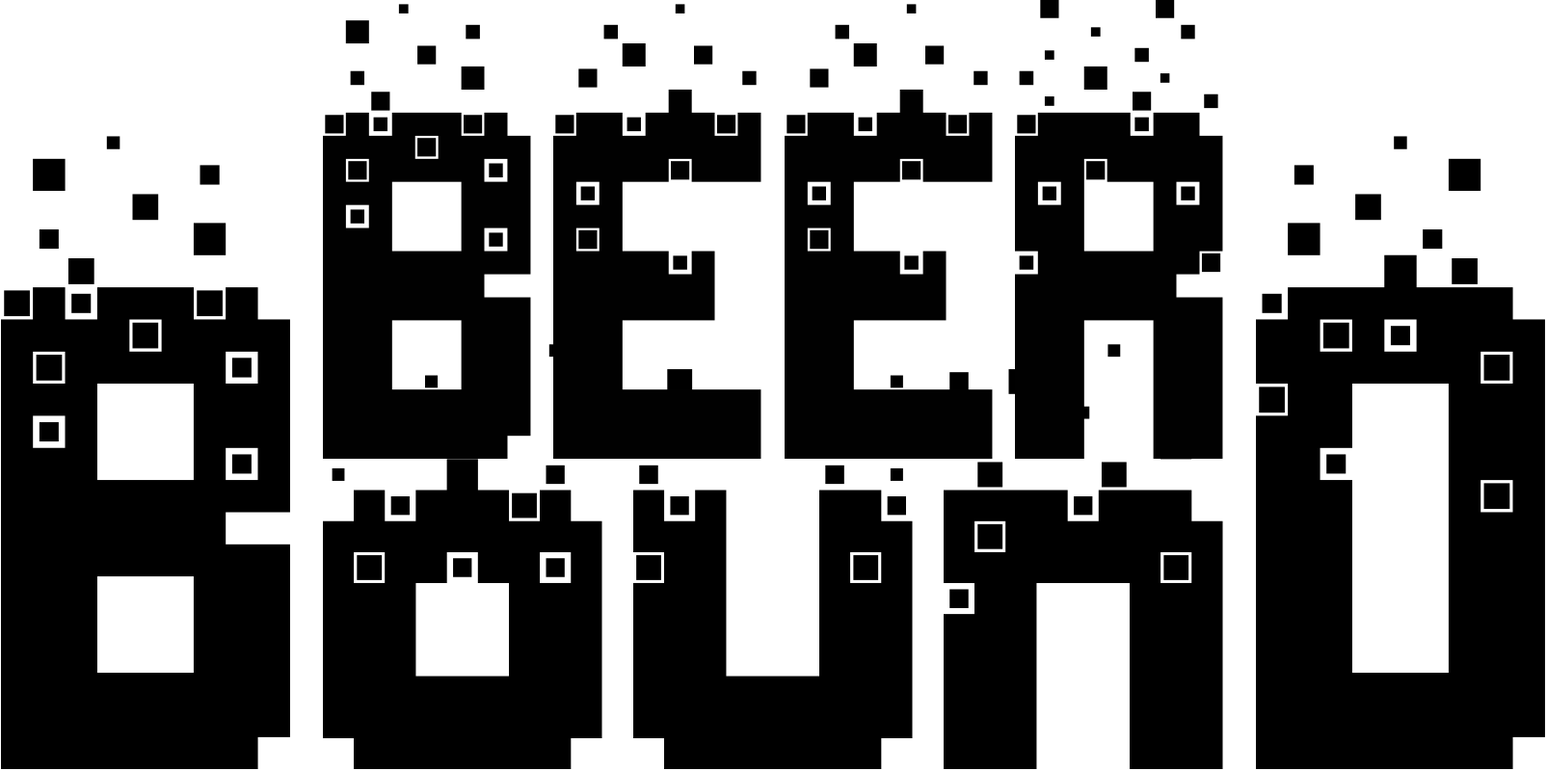
<style>
.page{position:relative;width:1547px;height:771px;background:#ffffff}
.page>*{position:absolute;margin:0}
.t1{font:576.9px "Nightmare-Codehack";color:#010101}
.t2{font:803.1px "Nightmare-Codehack";color:#000000}
.t3{font:775.1px "Nightmare-Codehack";color:#000000}
</style>
<div class="page">
<p class="t1" style="left:323px;top:0px;width:900px;height:459px">BEER</p>
<p class="t2" style="left:1px;top:136px;width:289px;height:633px">B</p>
<p class="t2" style="left:1256px;top:136px;width:289px;height:633px">D</p>
<p class="t3" style="left:323px;top:341px;width:900px;height:428px">oun</p>
</div>
